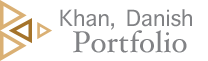
<style>
.page{position:relative;width:208px;height:61px;background:#ffffff}
.page>*{position:absolute;margin:0}
.t1{font:30px "AppleSymbols";color:#818285}
.t2{font:30px "HoeflerText-Regular";color:#818285}
</style>
<div class="page">
<p class="t1" style="left:60px;top:9px;width:132px;height:21px">Khan, Danish</p>
<p class="t2" style="left:73px;top:30px;width:114px;height:23px">Portfolio</p>
</div>
